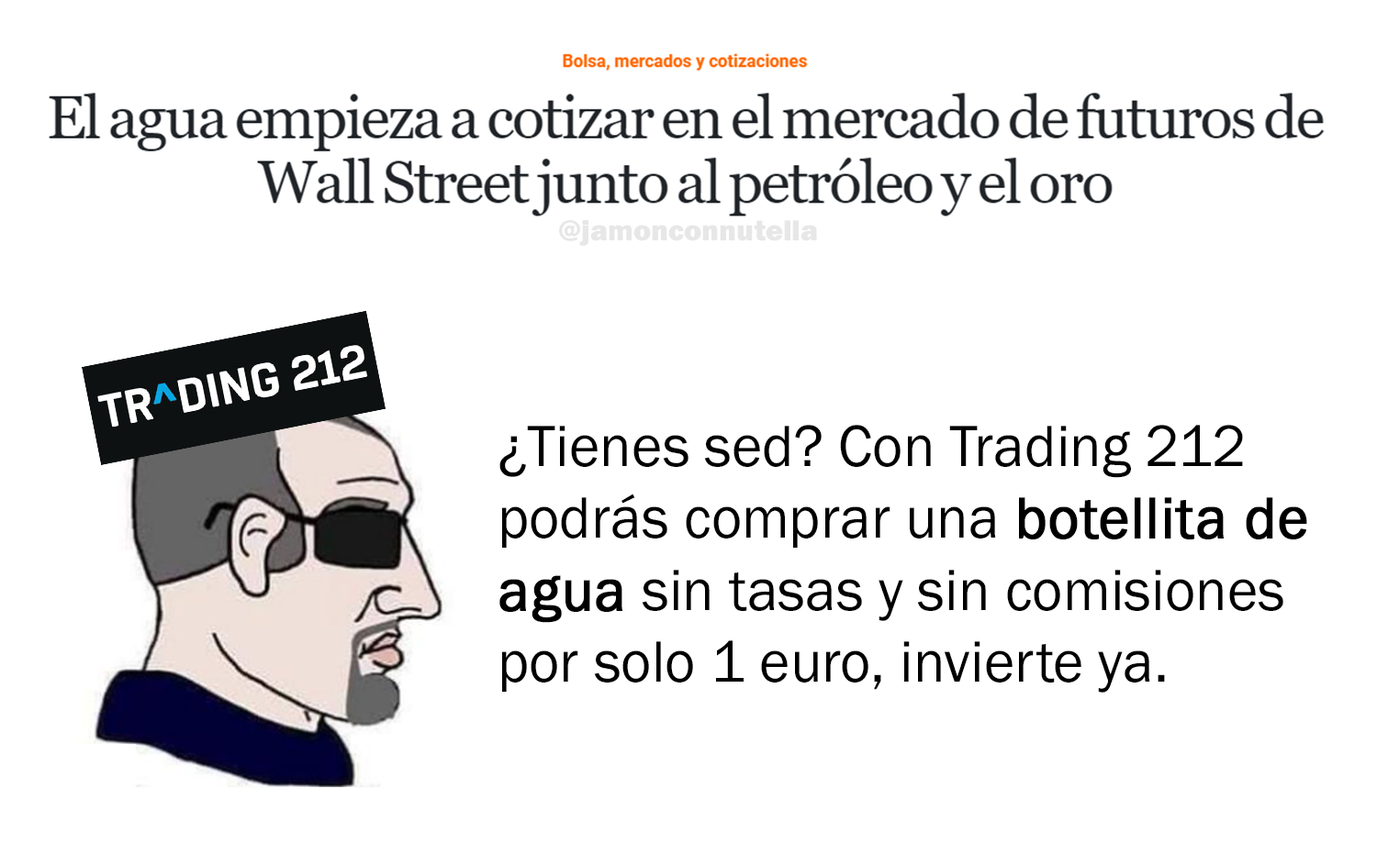
<style>
.page{position:relative;width:1377px;height:866px;background:#ffffff}
.page>*{position:absolute;margin:0}
.t1{font:29.8px "FranklinGothic-Heavy";color:#e7e7e7}
.t2{font:60.3px "FranklinGothic-Book";color:#000000}
.t3{font:60.3px "FranklinGothic-Book";color:#000000;font-weight:bold}
</style>
<div class="page">
<p class="t1" style="left:559px;top:220px;width:258px;height:26px">@jamonconnutella</p>
<p class="t2" style="left:499px;top:425px;width:808px;height:268px">¿Tienes sed? Con Trading 212<br>podrás comprar una <span class="t3">botellita de<br>agua</span> sin tasas y sin comisiones<br>por solo 1 euro, invierte ya.</p>
</div>
